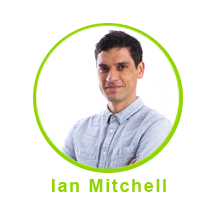
<style>
.page{position:relative;width:216px;height:210px;background:#ffffff}
.page>*{position:absolute;margin:0}
.t1{font:18.4px "Arial-BoldMT";letter-spacing:0.08em;color:#92d400}
</style>
<div class="page">
<p class="t1" style="left:52px;top:179px;width:114px;height:13px">Ian Mitchell</p>
</div>
